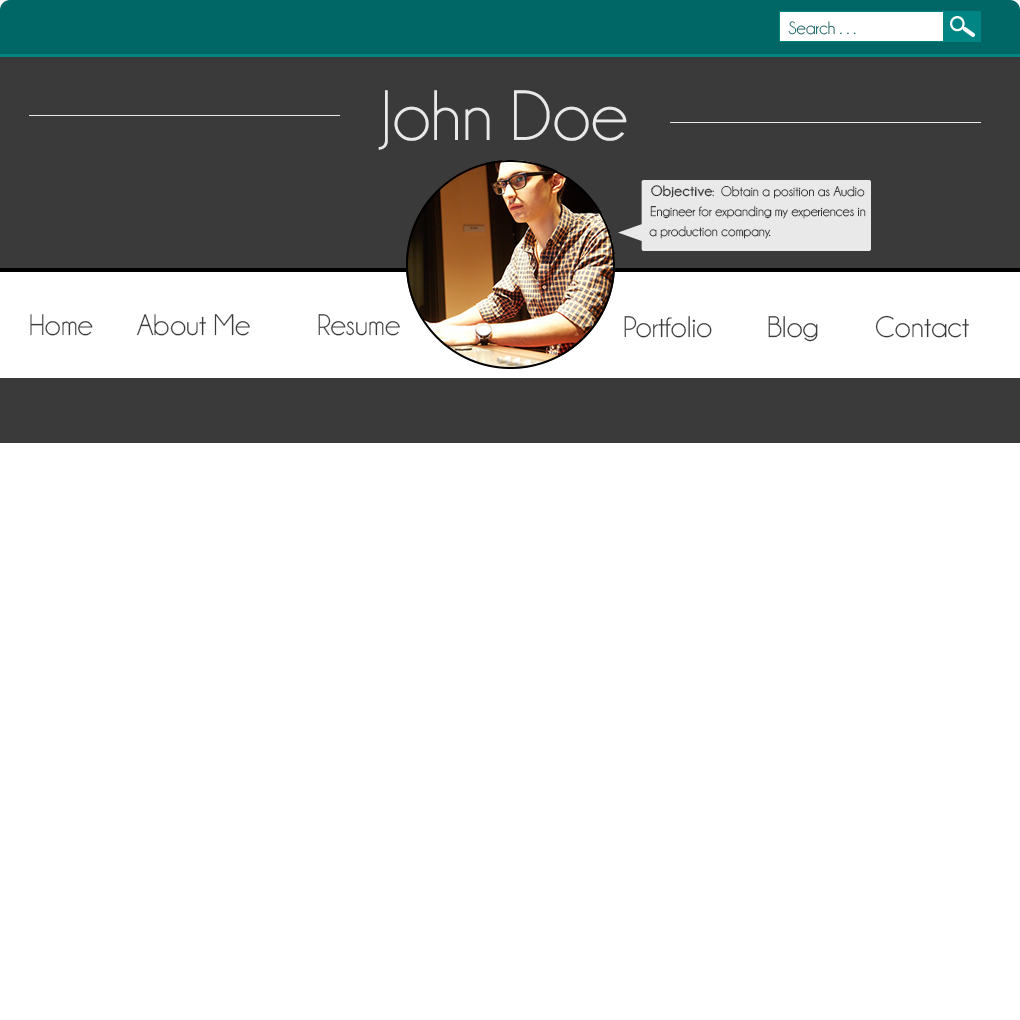
<style>
.page{position:relative;width:1020px;height:1020px;background:#ffffff}
.page>*{position:absolute;margin:0}
.t1{font:18px "Champagne&Limousines"}
.t2{font:72px "Champagne&Limousines";color:#e9e9e9}
.t3{font:14px/20px "Champagne&Limousines";color:#3a3a3a}
.t4{font:15px/20px "Champagne&Limousines-Bold";color:#3a3a3a}
.t5{font:30px "Champagne&Limousines";color:#3a3a3a}
</style>
<div class="page">
<p class="t1" style="left:788px;top:21px;width:68px;height:14px">Search . . .</p>
<p class="t2" style="left:378px;top:90px;width:249px;height:60px">John Doe</p>
<p class="t3" style="left:649px;top:185px;width:217px;height:54px"><span class="t4">Objective</span>:  Obtain a position as Audio Engineer for expanding my experiences in a production company.</p>
<p class="t5" style="left:30px;top:314px;width:370px;height:22px">Home   About Me   Resume</p>
<p class="t5" style="left:624px;top:315px;width:345px;height:27px">Portfolio   Blog   Contact</p>
</div>
